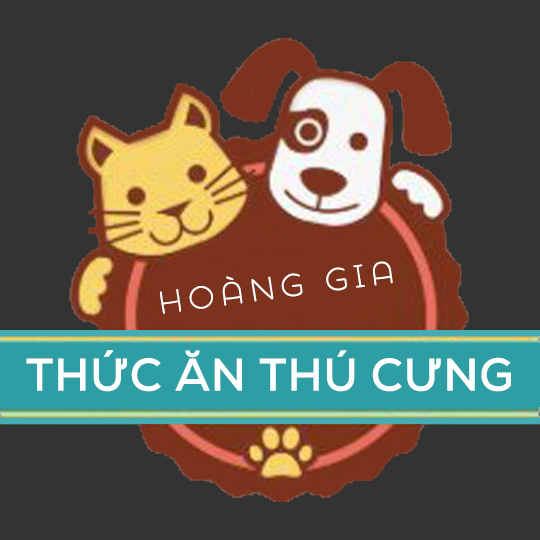
<style>
.page{position:relative;width:540px;height:540px;background:#333333}
.page>*{position:absolute;margin:0}
.t1{font:41.3px "iCielShowcase-Sans";letter-spacing:0.14em;color:#ffffff}
.t2{font:45.5px "SVN-NexaBold";letter-spacing:0.02em;color:#ffffff}
</style>
<div class="page">
<p class="t1" style="left:160px;top:261px;width:233px;height:53px;rotate:-8deg">Hoàng Gia</p>
<p class="t2" style="left:26px;top:350px;width:485px;height:42px">THỨC ĂN THÚ CƯNG</p>
</div>
